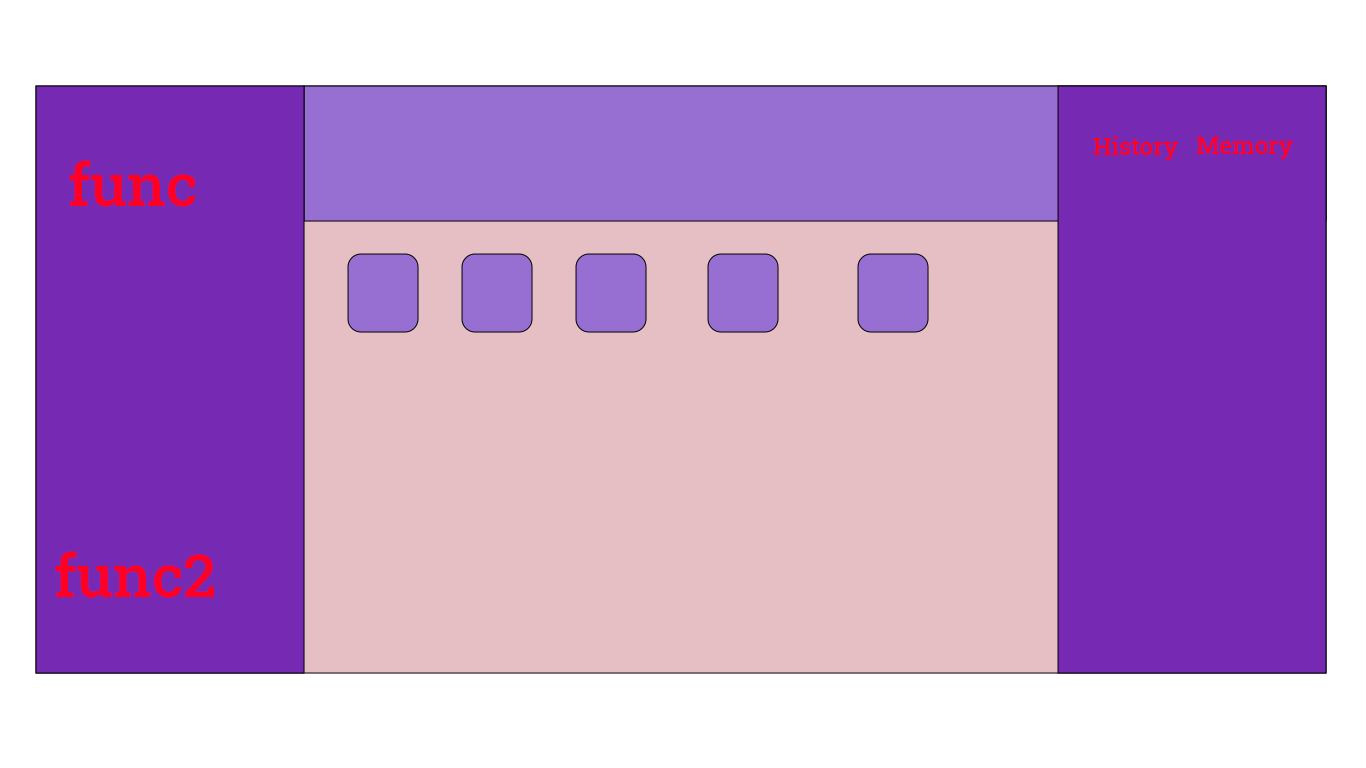
<style>
.page{position:relative;width:1366px;height:768px;background:#e6bfc4}
.page>*{position:absolute;margin:0}
.t1{font:24px "RobotoSlab-Medium";color:#ff0024}
.t2{font:60px "RobotoSlab-Medium";color:#ff0024}
</style>
<div class="page">
<p class="t1" style="left:1093px;top:136px;width:85px;height:24px">History</p>
<p class="t1" style="left:1196px;top:137px;width:97px;height:22px">Memory</p>
<p class="t2" style="left:69px;top:160px;width:127px;height:47px">func 1a</p>
<p class="t2" style="left:55px;top:551px;width:159px;height:47px">func2Wx6XM)kbUn5Q@</p>
</div>
